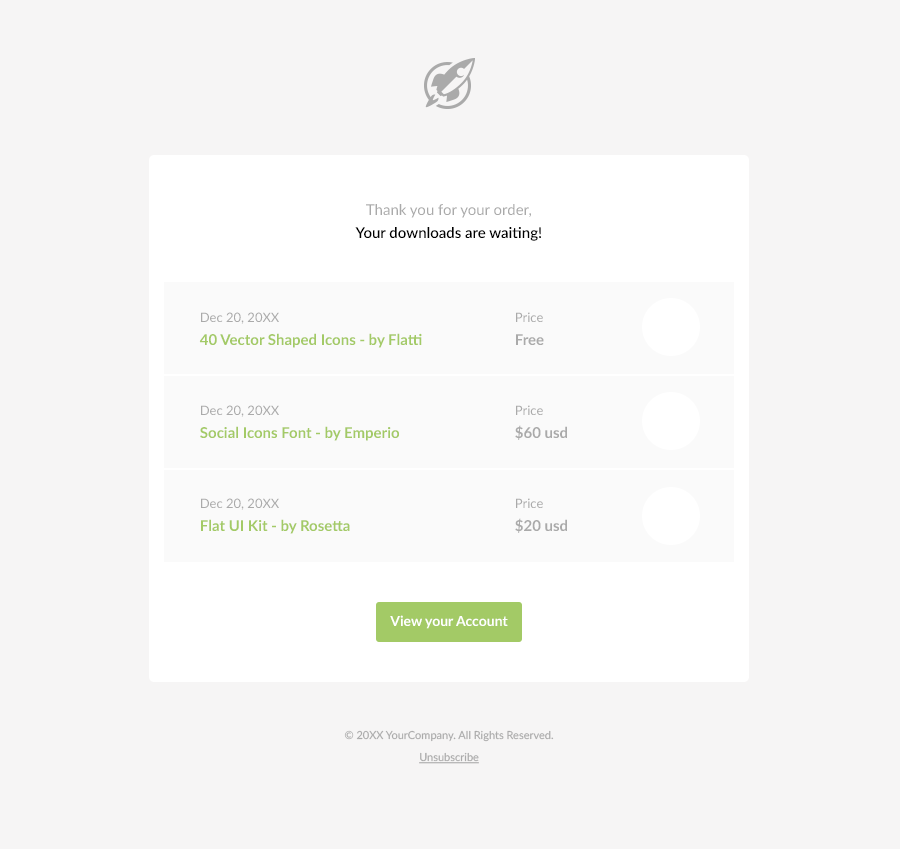
<style>
.page{position:relative;width:900px;height:849px;background:#f6f5f5}
.page>*{position:absolute;margin:0}
.t1{font:15px/23px "Lato-Semibold";color:#000000}
.t2{font:15px/23px "Lato-Regular";color:#aaaaaa}
.t3{font:15px/23px "Lato-Bold";color:#a3ca66}
.t4{font:13px/23px "Lato-Regular";color:#aaaaaa}
.t5{font:15px/23px "Lato-Bold";color:#aaaaaa}
.t6{font:14px "Lato-Bold";color:#ffffff}
.t7{font:11px/22px "Lato-Regular";color:#aaaaaa}
.t8{font:11px/22px "Lato-Regular";color:#aaaaaa;text-decoration:underline}
</style>
<div class="page">
<p class="t1" style="left:355px;top:204px;width:186px;height:37px;text-align:center"><span class="t2">Thank you for your order,<br></span>Your downloads are waiting!</p>
<p class="t3" style="left:199px;top:312px;width:223px;height:36px"><span class="t4">Dec 20, 20XX<br></span>40 Vector Shaped Icons - by Flatti</p>
<p class="t4" style="left:516px;top:312px;width:28px;height:33px">Price<br><span class="t5">Free</span></p>
<p class="t3" style="left:200px;top:405px;width:199px;height:36px"><span class="t4">Dec 20, 20XX<br></span>Social Icons Font - by Emperio</p>
<p class="t5" style="left:515px;top:405px;width:52px;height:35px"><span class="t4">Price<br></span>$60 usd</p>
<p class="t3" style="left:201px;top:498px;width:149px;height:36px"><span class="t4">Dec 20, 20XX<br></span>Flat UI Kit - by Rosetta</p>
<p class="t5" style="left:515px;top:498px;width:52px;height:35px"><span class="t4">Price<br></span>$20 usd</p>
<p class="t6" style="left:390px;top:615px;width:118px;height:14px">View your Account</p>
<p class="t7" style="left:344px;top:730px;width:210px;height:34px;text-align:center">© 20XX YourCompany. All Rights Reserved.<br><span class="t8">Unsubscribe</span></p>
</div>
